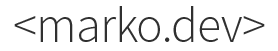
<style>
.page{position:relative;width:278px;height:51px;background:#ffffff}
.page>*{position:absolute;margin:0}
.t1{font:50px "SourceSansPro-Light";letter-spacing:-0.02em;color:#303030}
</style>
<div class="page">
<p class="t1" style="left:14px;top:6px;width:251px;height:36px">&lt;marko.dev&gt;</p>
</div>
